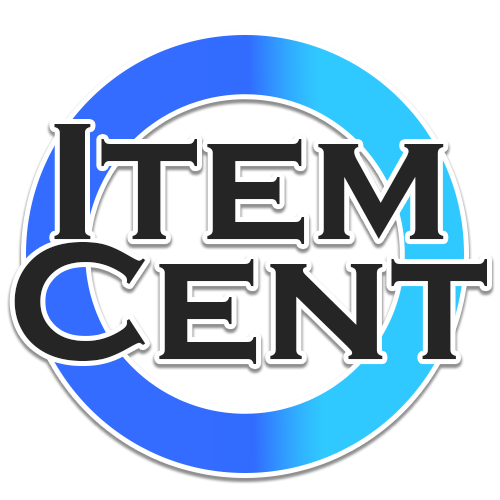
<style>
.page{position:relative;width:500px;height:500px;background:#ffffff}
.page>*{position:absolute;margin:0}
.t1{font:172.5px/119.6px "CopperplateGothic-Bold";color:#252525}
</style>
<div class="page">
<p class="t1" style="left:14px;top:124px;width:473px;height:240px;text-align:center">Item<br>Cent</p>
</div>
